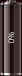
<style>
.page{position:relative;width:22px;height:76px}
.page>*{position:absolute;margin:0}
.t1{font:9.2px "MyriadPro-Regular";letter-spacing:-0.05em}
</style>
<div class="page">
<p class="t1" style="left:8px;top:32px;width:7px;height:11px;rotate:-90deg">0%</p>
</div>
